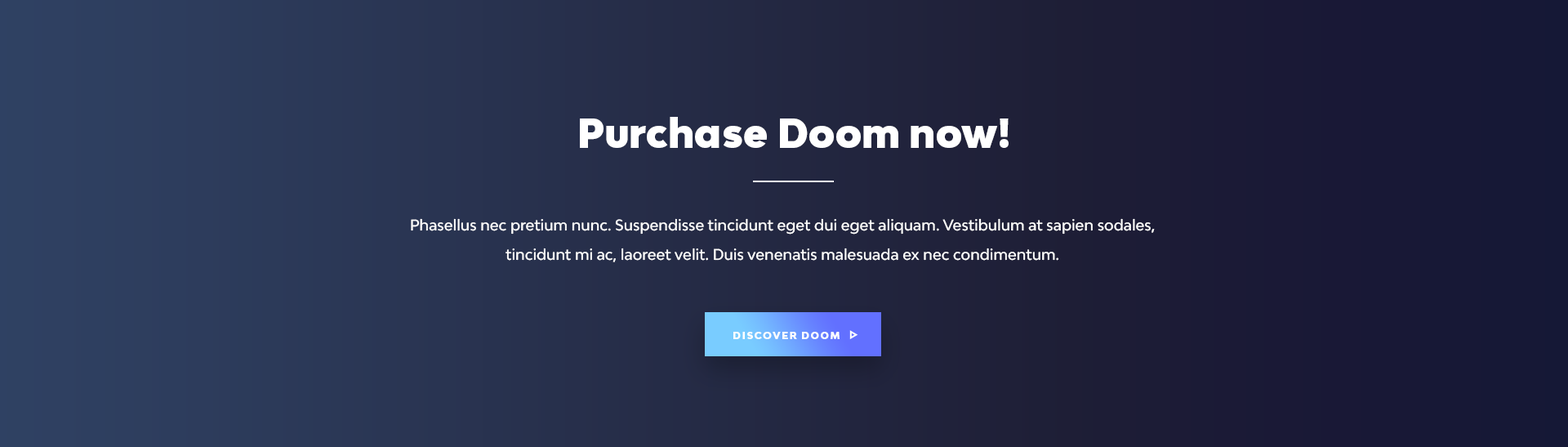
<style>
.page{position:relative;width:1568px;height:447px}
.page>*{position:absolute;margin:0}
.t1{font:39.2px "BwModelicaSS01-Black";color:#ffffff}
.t2{font:14.7px/29.4px "BwModelica-Medium";color:#ffffff}
.t3{font:9.8px "BwModelicaSS01-Black";letter-spacing:0.12em;color:#ffffff;text-transform:uppercase}
</style>
<div class="page">
<p class="t1" style="left:580px;top:117px;width:429px;height:31px">Purchase Doom now!</p>
<p class="t2" style="left:411px;top:218px;width:744px;height:44px;text-align:center">Phasellus nec pretium nunc. Suspendisse tincidunt eget dui eget aliquam. Vestibulum at sapien sodales, tincidunt mi ac, laoreet velit. Duis venenatis malesuada ex nec condimentum.</p>
<p class="t3" style="left:733px;top:332px;width:107px;height:7px">discover Doom</p>
</div>
